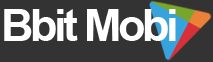
<style>
.page{position:relative;width:213px;height:62px;background:#333333}
.page>*{position:absolute;margin:0}
.t1{font:45px "Arial-BoldMT";letter-spacing:-0.075em;color:#ffffff}
</style>
<div class="page">
<p class="t1" style="left:4px;top:9px;width:172px;height:32px">Bbit Mobi</p>
</div>
